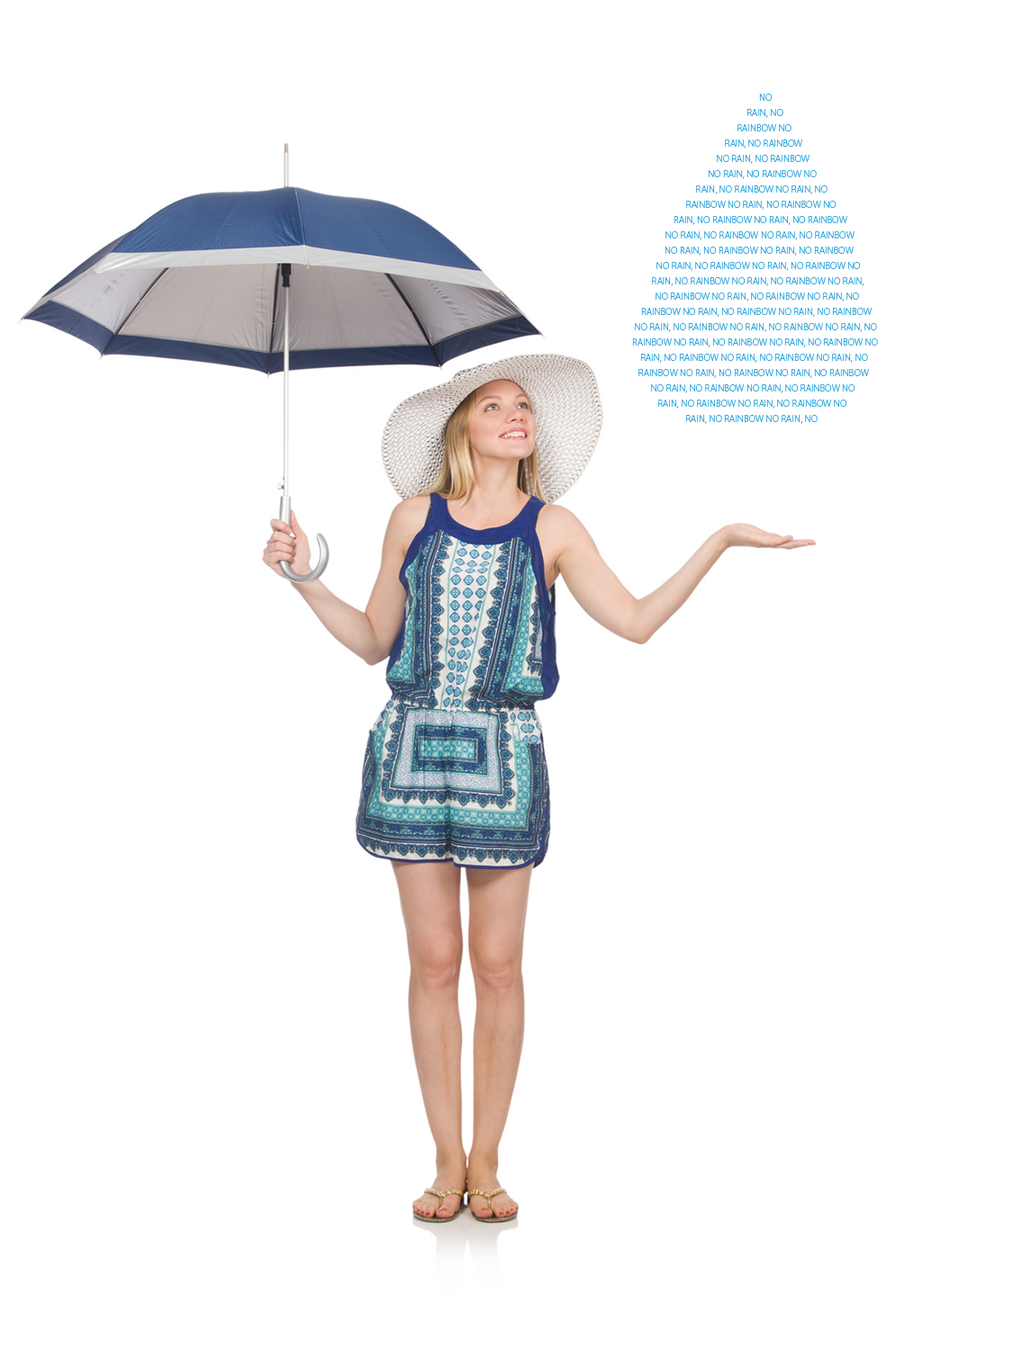
<style>
.page{position:relative;width:1022px;height:1359px;background:#ffffff}
.page>*{position:absolute;margin:0}
.t1{font:9px/15.3px "KozGoPr6N-Light";color:#30abde}
</style>
<div class="page">
<p class="t1" style="left:632px;top:94px;width:246px;height:330px;text-align:center">NO RAIN, NO RAINBOW NO RAIN, NO RAINBOW NO RAIN, NO RAINBOW NO RAIN, NO RAINBOW NO RAIN, NO RAINBOW NO RAIN, NO RAINBOW NO RAIN, NO RAINBOW NO RAIN, NO RAINBOW NO RAIN, NO RAINBOW NO RAIN, NO RAINBOW NO RAIN, NO RAINBOW NO RAIN, NO RAINBOW NO RAIN, NO RAINBOW NO RAIN, NO RAINBOW NO RAIN, NO RAINBOW NO RAIN, NO RAINBOW NO RAIN, NO RAINBOW NO RAIN, NO RAINBOW NO RAIN, NO RAINBOW NO RAIN, NO RAINBOW NO RAIN, NO RAINBOW NO RAIN, NO RAINBOW NO RAIN, NO RAINBOW NO RAIN, NO RAINBOW NO RAIN, NO RAINBOW NO RAIN, NO RAINBOW NO RAIN, NO RAINBOW NO RAIN, NO RAINBOW NO RAIN, NO RAINBOW NO RAIN, NO RAINBOW NO RAIN, NO RAINBOW NO RAIN, NO RAINBOW NO RAIN, NO RAINBOW NO RAIN, NO RAINBOW NO RAIN, NO RAINBOW NO RAIN, NO RAINBOW NO RAIN, NO RAINBOW NO RAIN, NO RAINBOW NO RAIN, NO RAINBOW NO RAIN, NO RAINBOW NO RAIN, NO RAINBOW NO RAIN, NO RAINBOW NO RAIN, NO RAINBOW NO RAIN, NO RAINBOW NO RAIN, NO RAINBOW NO RAIN, NO RAINBOW NO RAIN, NO RAINBOW NO RAIN, NO RAINBOW NO RAIN, NO RAINBOW NO RAIN, NO RAINBOW NO RAIN, NO RAINBOW NO RAIN, NO RAINBOW NO RAIN, NO RAINBOW NO RAIN, NO RAINBOW NO RAIN, NO RAINBOW NO RAIN, NO RAINBOW NO RAIN, NO RAINBOW NO RAIN, NO RAINBOW NO RAIN, NO RAINBOW NO RAIN, NO RAINBOW NO RAIN, NO RAINBOW NO RAIN, NO RAINBOW NO RAIN, NO RAINBOW NO RAIN, NO RAINBOW</p>
</div>
